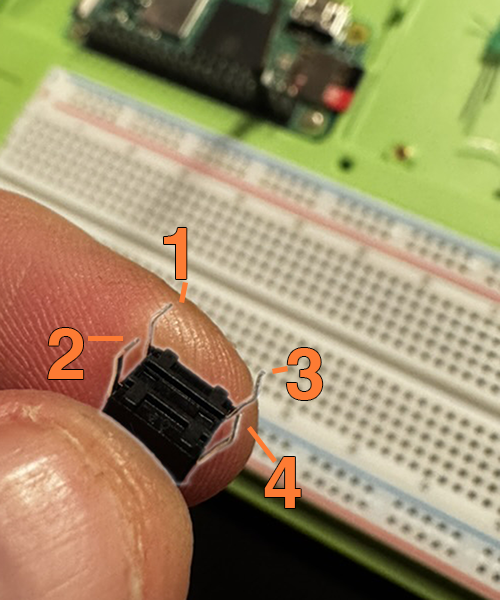
<style>
.page{position:relative;width:500px;height:600px}
.page>*{position:absolute;margin:0}
.t1{font:72px "Helvetica-Bold";color:#fd7b33}
</style>
<div class="page">
<p class="t1" style="left:164px;top:228px;width:23px;height:51px">1</p>
<p class="t1" style="left:48px;top:328px;width:36px;height:51px">2</p>
<p class="t1" style="left:286px;top:348px;width:37px;height:52px">3</p>
<p class="t1" style="left:264px;top:457px;width:37px;height:51px">4</p>
</div>
